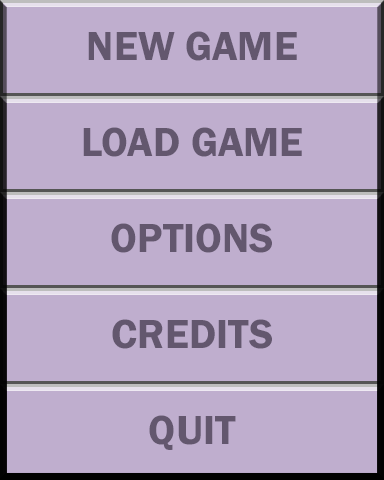
<style>
.page{position:relative;width:384px;height:480px;background:#bfaece}
.page>*{position:absolute;margin:0}
.t1{font:42px "FranklinGothic-Demi";color:#63576e}
</style>
<div class="page">
<p class="t1" style="left:88px;top:31px;width:209px;height:30px">NEW GAME</p>
<p class="t1" style="left:83px;top:127px;width:219px;height:30px">LOAD GAME</p>
<p class="t1" style="left:111px;top:223px;width:161px;height:30px">OPTIONS</p>
<p class="t1" style="left:112px;top:319px;width:160px;height:30px">CREDITS</p>
<p class="t1" style="left:149px;top:415px;width:87px;height:35px">QUIT</p>
</div>
